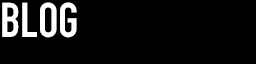
<style>
.page{position:relative;width:256px;height:64px;background:#000000}
.page>*{position:absolute;margin:0}
.t1{font:48px "DINCondensed-Bold";color:#ffffff}
</style>
<div class="page">
<p class="t1" style="left:2px;top:2px;width:75px;height:36px">BLOG</p>
</div>
